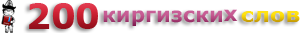
<style>
.page{position:relative;width:300px;height:33px;background:#ffffff}
.page>*{position:absolute;margin:0}
.t1{font:34.6px "Verdana-Bold"}
.t2{font:20.6px "Verdana-Bold";color:#bc5188}
.t3{font:19.6px "Verdana-Bold";scale:1.15 1}
</style>
<div class="page">
<p class="t1" style="left:29px;top:3px;width:69px;height:26px">200</p>
<p class="t2" style="left:103px;top:9px;width:135px;height:17px">киргизских</p>
<p class="t3" style="left:241px;top:11px;width:59px;height:11px">слов</p>
</div>
